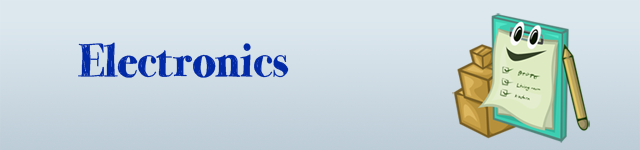
<style>
.page{position:relative;width:640px;height:150px}
.page>*{position:absolute;margin:0}
.t1{font:47.2px "MomsDiner";color:#0229a6}
</style>
<div class="page">
<p class="t1" style="left:78px;top:42px;width:211px;height:36px">Electronics</p>
</div>
